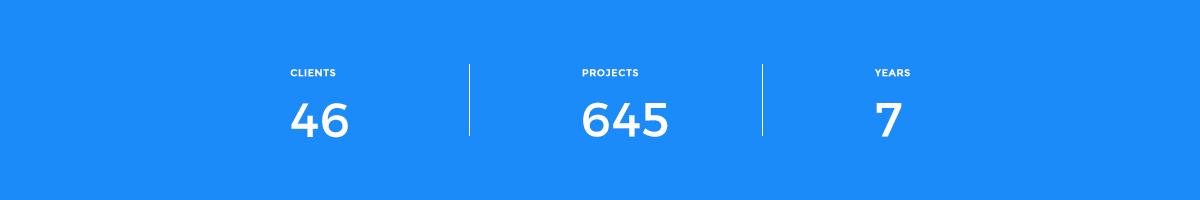
<style>
.page{position:relative;width:1200px;height:200px;background:#1b8bf9}
.page>*{position:absolute;margin:0}
.t1{font:10px "Montserrat-Bold";letter-spacing:0.04em;color:#ffffff;text-transform:uppercase}
.t2{font:48px "Montserrat-Regular";letter-spacing:0.025em;color:#ffffff}
</style>
<div class="page">
<p class="t1" style="left:290px;top:69px;width:46px;height:8px">clients</p>
<p class="t1" style="left:582px;top:69px;width:56px;height:8px">projects</p>
<p class="t1" style="left:875px;top:69px;width:35px;height:8px">years</p>
<p class="t2" style="left:583px;top:102px;width:85px;height:35px">645</p>
<p class="t2" style="left:291px;top:103px;width:57px;height:35px">46</p>
<p class="t2" style="left:876px;top:103px;width:26px;height:34px">7</p>
</div>
